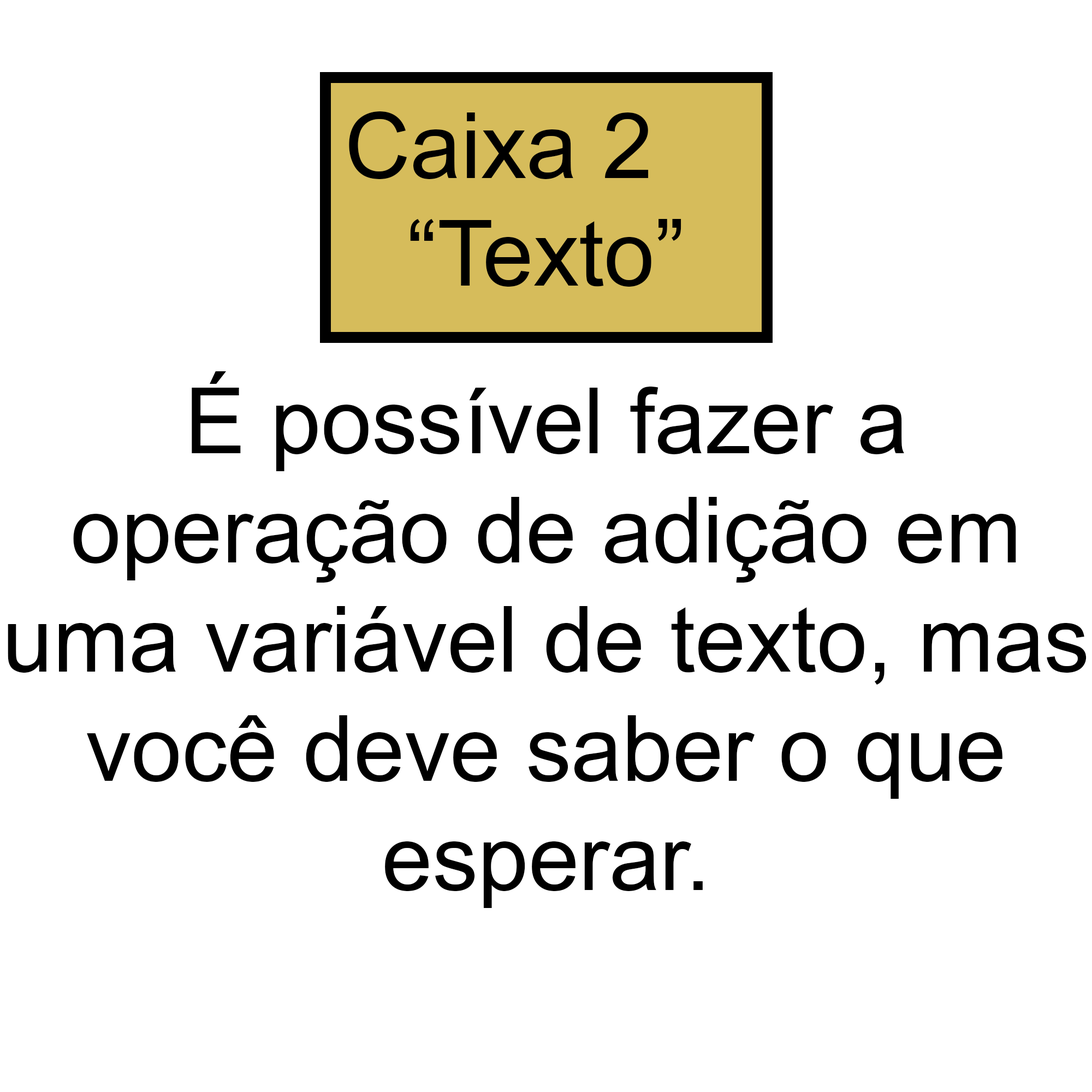
<style>
.page{position:relative;width:1092px;height:1092px;background:#ffffff}
.page>*{position:absolute;margin:0}
.t1{font:91px "ArialMT";color:#000000}
</style>
<div class="page">
<p class="t1" style="left:349px;top:111px;width:300px;height:68px">Caixa 2</p>
<p class="t1" style="left:410px;top:219px;width:271px;height:68px">“Texto”</p>
<p class="t1" style="left:8px;top:371px;width:1079px;height:537px;text-align:center">É possível fazer a<br>operação de adição em<br>uma variável de texto, mas<br>você deve saber o que<br>esperar.</p>
</div>
